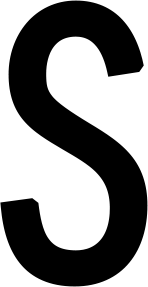
<style>
.page{position:relative;width:148px;height:287px;background:#ffffff}
.page>*{position:absolute;margin:0}
.t1{font:400px "OratorStd";letter-spacing:-0.1em;color:#000000;font-weight:bold}
</style>
<div class="page">
<p class="t1" style="left:0px;top:0px;width:148px;height:287px">S</p>
</div>
